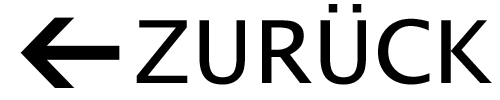
<style>
.page{position:relative;width:500px;height:100px;background:#ffffff}
.page>*{position:absolute;margin:0}
.t1{font:100px "LucidaConsole";color:#000000}
</style>
<div class="page">
<p class="t1" style="left:136px;top:4px;width:356px;height:81px">ZURÜCK</p>
</div>
